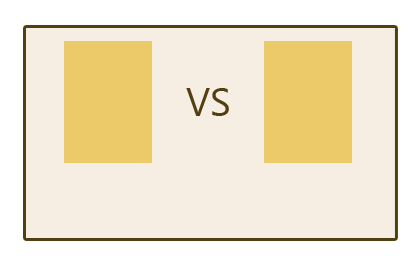
<style>
.page{position:relative;width:420px;height:270px;background:#f6eee2}
.page>*{position:absolute;margin:0}
.t1{font:38.9px "SegoeUI";color:#513e11}
</style>
<div class="page">
<p class="t1" style="left:186px;top:88px;width:43px;height:28px">VS</p>
</div>
